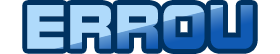
<style>
.page{position:relative;width:280px;height:54px;background:#003261}
.page>*{position:absolute;margin:0}
.t1{font:69.3px "DFSoGeiStd-W9";scale:0.92 1}
</style>
<div class="page">
<p class="t1" style="left:27px;top:5px;width:226px;height:44px">ERROU</p>
</div>
